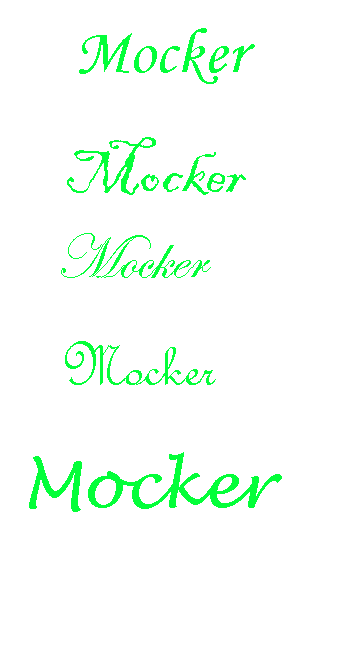
<style>
.page{position:relative;width:354px;height:660px;background:#ffffff}
.page>*{position:absolute;margin:0}
.t1{font:64px "MonotypeCorsiva";color:#04ff39}
.t2{font:64px "BlackadderITC-Regular";color:#04ff39}
.t3{font:64px "EdwardianScriptITC";color:#04ff39}
.t4{font:64px "FrenchScriptMT";color:#04ff39}
.t5{font:64px "LucidaHandwriting-Italic";color:#04ff39}
</style>
<div class="page">
<p class="t1" style="left:79px;top:28px;width:176px;height:56px">Mocker</p>
<p class="t2" style="left:67px;top:137px;width:179px;height:58px">Mocker</p>
<p class="t3" style="left:61px;top:233px;width:150px;height:45px">Mocker</p>
<p class="t4" style="left:65px;top:341px;width:151px;height:44px">Mocker</p>
<p class="t5" style="left:29px;top:452px;width:253px;height:60px">Mocker</p>
</div>
